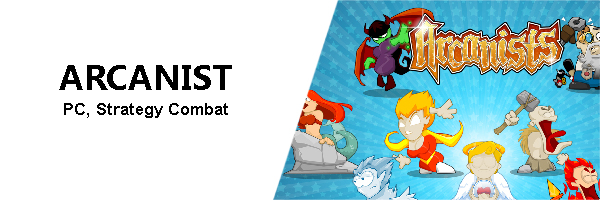
<style>
.page{position:relative;width:600px;height:200px;background:#ffffff}
.page>*{position:absolute;margin:0}
.t1{font:16.7px/25px "Arial-BoldMT";color:#000000}
.t2{font:33.3px/25px "MicrosoftYaHei-Bold";color:#000000}
</style>
<div class="page">
<p class="t1" style="left:59px;top:65px;width:173px;height:53px;text-align:center"><span class="t2">ARCANIST<br></span>PC, Strategy Combat</p>
</div>
